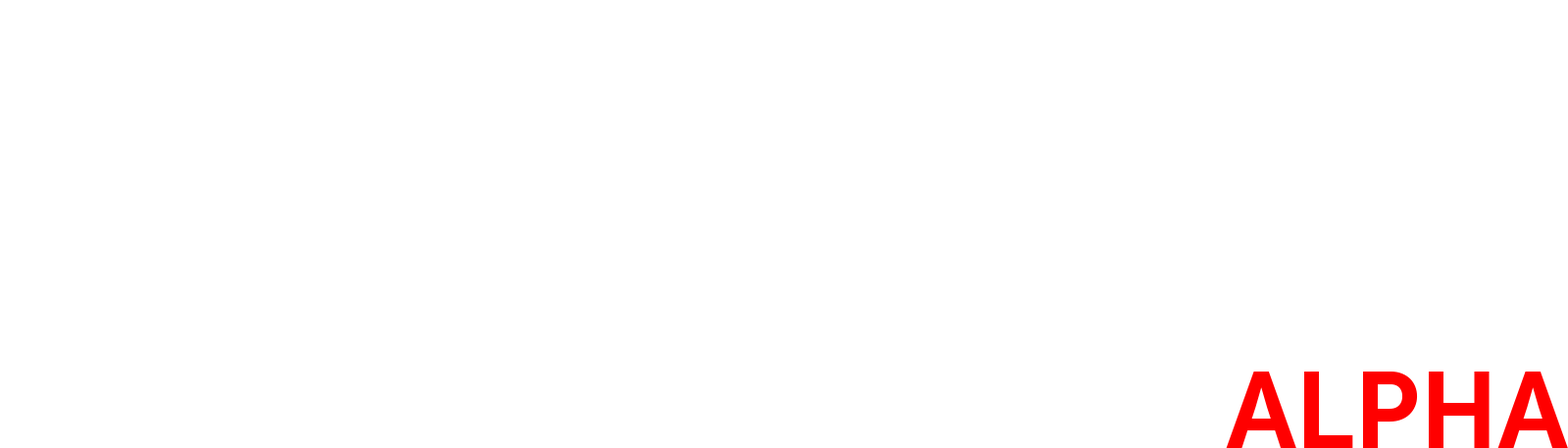
<style>
.page{position:relative;width:1568px;height:448px;background:#ffffff}
.page>*{position:absolute;margin:0}
.t1{font:113.1px "SukhumvitSet-Bold";color:#ff0000}
</style>
<div class="page">
<p class="t1" style="left:1226px;top:372px;width:342px;height:76px">ALPHA</p>
</div>
